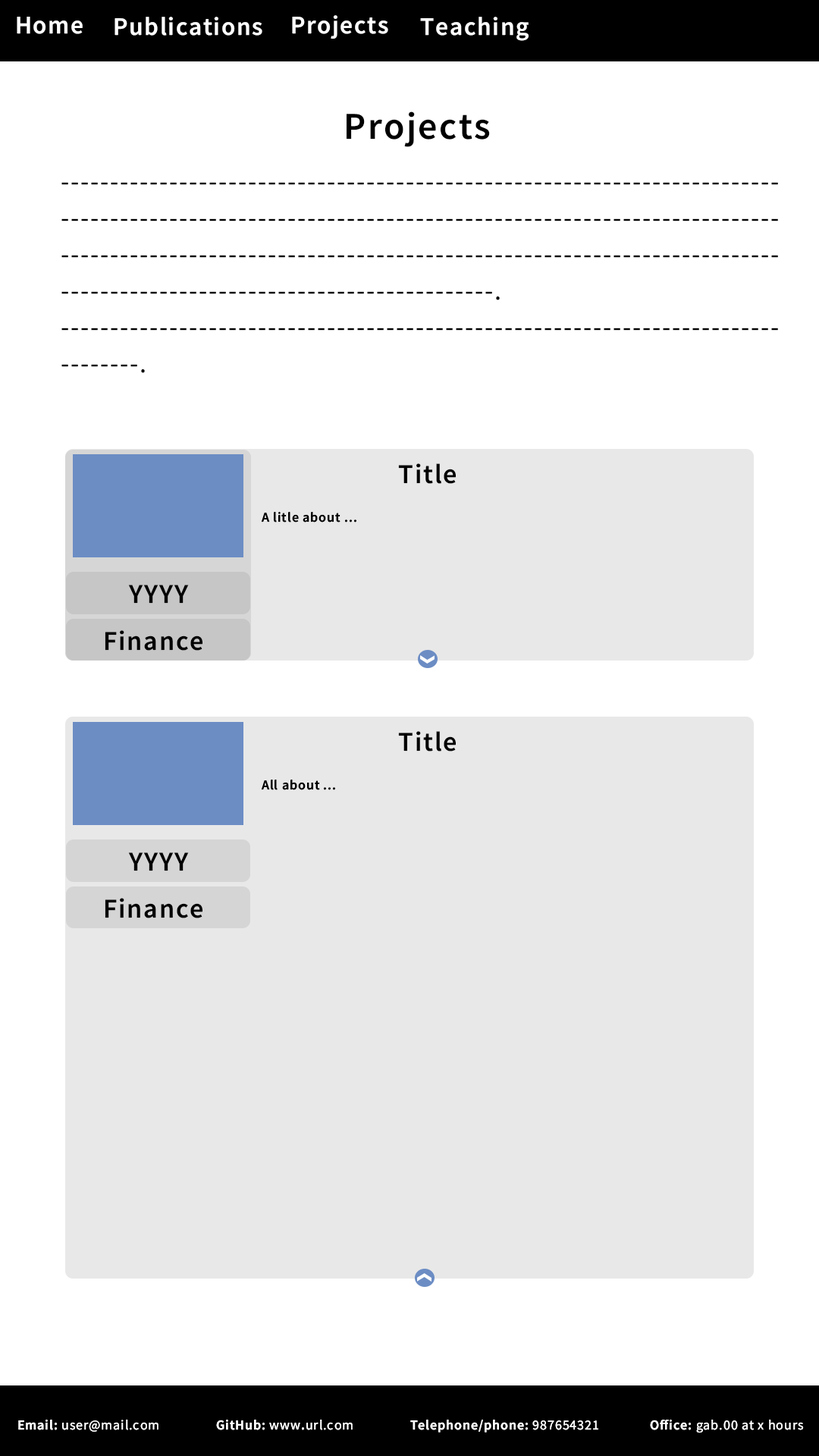
<style>
.page{position:relative;width:819px;height:1456px;background:#ffffff}
.page>*{position:absolute;margin:0}
.t1{font:25.3px "SourceSansRoman-Semibold";letter-spacing:0.05em;color:#ffffff}
.t2{font:37.9px "SourceSansRoman-Semibold";letter-spacing:0.05em;color:#000000}
.t3{font:27.3px/36.4px "SourceSansRoman-Regular";letter-spacing:0.05em;color:#000000}
.t4{font:27.3px "SourceSansRoman-Semibold";letter-spacing:0.05em;color:#000000}
.t5{font:13.6px "SourceSansRoman-Semibold";letter-spacing:0.05em;color:#000000}
.t6{font:13.6px "SourceSansRoman-Regular";letter-spacing:0.05em;color:#ffffff}
.t7{font:13.6px "SourceSansRoman-Semibold";letter-spacing:0.05em;color:#ffffff}
</style>
<div class="page">
<p class="t1" style="left:17px;top:17px;width:66px;height:17px">Home</p>
<p class="t1" style="left:115px;top:17px;width:147px;height:19px">Publications</p>
<p class="t1" style="left:292px;top:15px;width:96px;height:24px">Projects</p>
<p class="t1" style="left:420px;top:17px;width:109px;height:24px">Teaching</p>
<p class="t2" style="left:347px;top:111px;width:143px;height:36px">Projects</p>
<p class="t3" style="left:61px;top:182px;width:717px;height:191px">-------------------------------------------------------------------------<br>-------------------------------------------------------------------------<br>-------------------------------------------------------------------------<br>--------------------------------------------.<br>-------------------------------------------------------------------------<br>--------.</p>
<p class="t4" style="left:398px;top:463px;width:58px;height:21px">Title</p>
<p class="t5" style="left:262px;top:512px;width:94px;height:10px">A litle about ...</p>
<p class="t4" style="left:128px;top:585px;width:61px;height:19px">YYYY</p>
<p class="t4" style="left:105px;top:630px;width:97px;height:21px">Finance</p>
<p class="t4" style="left:398px;top:731px;width:58px;height:20px">Title</p>
<p class="t5" style="left:262px;top:780px;width:73px;height:10px">All about ...</p>
<p class="t4" style="left:128px;top:852px;width:61px;height:19px">YYYY</p>
<p class="t4" style="left:105px;top:898px;width:97px;height:20px">Finance</p>
<p class="t6" style="left:18px;top:1420px;width:140px;height:12px"><span class="t7">Email: </span>user@mail.com</p>
<p class="t7" style="left:216px;top:1420px;width:137px;height:10px">GitHub: <span class="t6">www</span>.<span class="t6">url.com</span></p>
<p class="t7" style="left:410px;top:1420px;width:188px;height:12px">Telephone/phone: <span class="t6">987654321</span></p>
<p class="t6" style="left:650px;top:1420px;width:154px;height:13px"><span class="t7">Office:</span> gab.00 at x hours</p>
</div>
